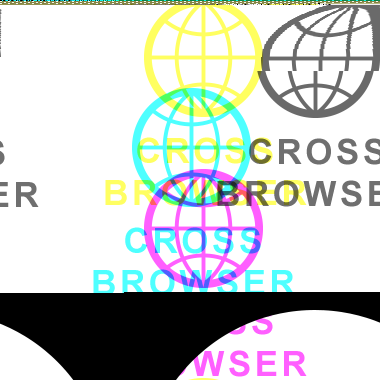
<style>
.page{position:relative;width:380px;height:380px;background:#ffffff}
.page>*{position:absolute;margin:0}
.t1{font:35px "Arial-BoldMT";letter-spacing:0.1em}
</style>
<div class="page">
<p class="t1" style="left:93px;top:226px;width:202px;height:69px;text-align:center">CROSS<br>BROWSER</p>
</div>
